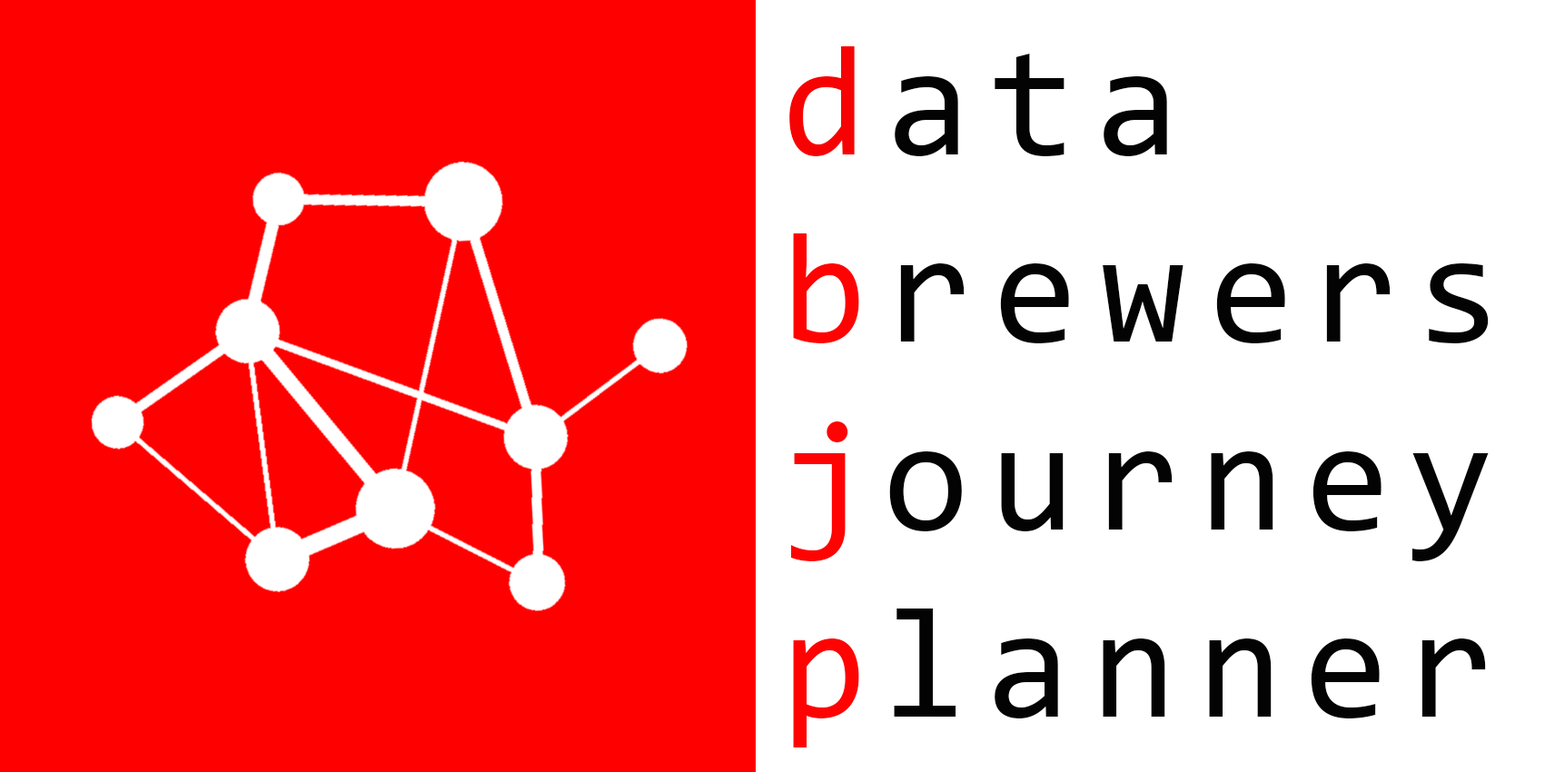
<style>
.page{position:relative;width:1545px;height:772px;background:#ffffff}
.page>*{position:absolute;margin:0}
.t1{font:156.2px "Consolas";letter-spacing:0.16em;color:#030303}
.t2{font:156.2px "Consolas";letter-spacing:0.16em;color:#f70202}
.t3{font:156.2px "Consolas";letter-spacing:0.16em;color:#ff0202}
</style>
<div class="page">
<p class="t1" style="left:789px;top:46px;width:699px;height:701px"><span class="t2">d</span>ata<br><span class="t3">b</span>rewers<br><span class="t3">j</span>ourney<br><span class="t3">p</span>lanner</p>
</div>
